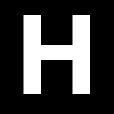
<style>
.page{position:relative;width:114px;height:114px;background:#000000}
.page>*{position:absolute;margin:0}
.t1{font:110.2px "HelveticaNeue-Bold";letter-spacing:0.2em;color:#ffffff}
</style>
<div class="page">
<p class="t1" style="left:23px;top:15px;width:67px;height:79px">H</p>
</div>
